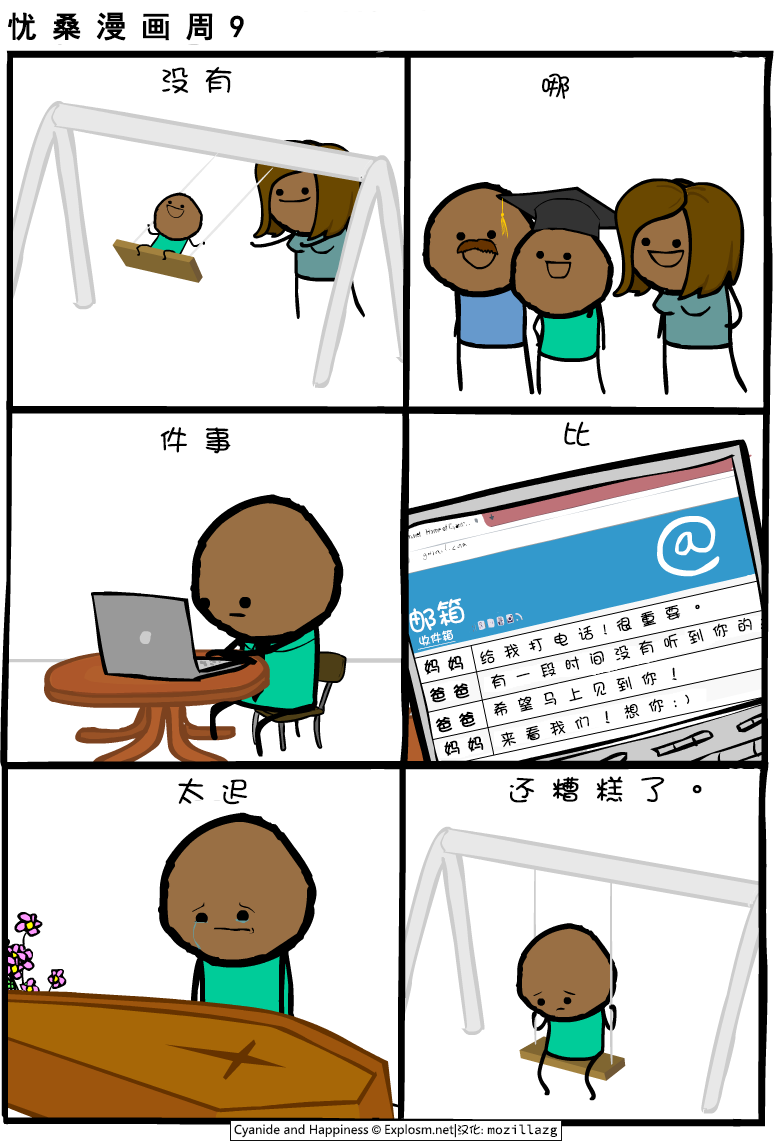
<style>
.page{position:relative;width:778px;height:1145px;background:#ffffff}
.page>*{position:absolute;margin:0}
.t1{font:30px "SimHei";letter-spacing:0.46em;color:#000000;font-weight:bold}
.t2{font:30px "DFGirl";letter-spacing:0.46em;color:#000000}
.t3{font:30px "DFGirl";color:#ffffff}
.t4{font:16px "DFGirl";letter-spacing:0.58em;color:#000000}
.t5{font:12px "DFGirl";color:#ffffff;text-decoration:underline}
.t6{font:16px "DFGirl";letter-spacing:0.46em;color:#000000;font-weight:bold}
</style>
<div class="page">
<p class="t1" style="left:8px;top:12px;width:236px;height:29px">忧桑漫画周9</p>
<p class="t2" style="left:162px;top:66px;width:70px;height:28px">没有</p>
<p class="t2" style="left:542px;top:73px;width:27px;height:27px">哪</p>
<p class="t2" style="left:564px;top:421px;width:26px;height:25px">比</p>
<p class="t2" style="left:160px;top:427px;width:71px;height:27px">件事</p>
<p class="t3" style="left:409px;top:598px;width:56px;height:35px;rotate:-14deg">邮箱</p>
<p class="t4" style="left:480px;top:604px;width:220px;height:61px;rotate:-13deg">给我打电话!很重要。</p>
<p class="t4" style="left:490px;top:617px;width:262px;height:72px;rotate:-13deg">有一段时间没有听到你的</p>
<p class="t5" style="left:419px;top:630px;width:37px;height:20px;rotate:-12deg">收件箱</p>
<p class="t6" style="left:424px;top:655px;width:40px;height:20px;rotate:-8deg">妈妈</p>
<p class="t4" style="left:494px;top:667px;width:183px;height:49px;rotate:-12deg">希望马上见到你！</p>
<p class="t6" style="left:430px;top:683px;width:40px;height:20px;rotate:-9deg">爸爸</p>
<p class="t4" style="left:500px;top:694px;width:190px;height:54px;rotate:-13deg">来看我们！想你:)</p>
<p class="t6" style="left:435px;top:711px;width:41px;height:22px;rotate:-13deg">爸爸</p>
<p class="t6" style="left:444px;top:736px;width:40px;height:20px;rotate:-10deg">妈妈</p>
<p class="t2" style="left:178px;top:778px;width:70px;height:27px">太迟</p>
<p class="t2" style="left:509px;top:776px;width:193px;height:27px">还糟糕了。</p>
</div>
